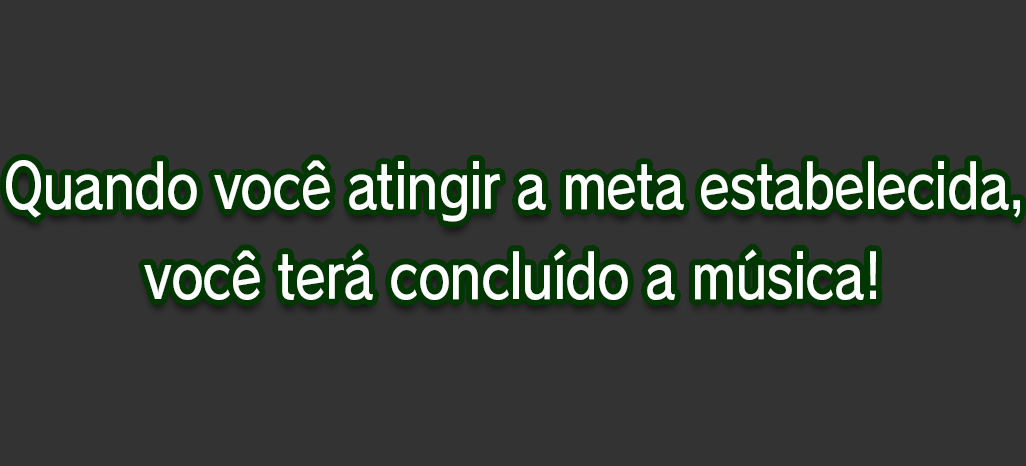
<style>
.page{position:relative;width:1026px;height:466px;background:#333333}
.page>*{position:absolute;margin:0}
.t1{font:61.3px/90.7px "RodinPro-DB";letter-spacing:-0.022em;color:#ffffff;scale:0.84 1}
</style>
<div class="page">
<p class="t1" style="left:6px;top:160px;width:1014px;height:140px;text-align:center">Quando você atingir a meta estabelecida,<br>você terá concluído a música!</p>
</div>
